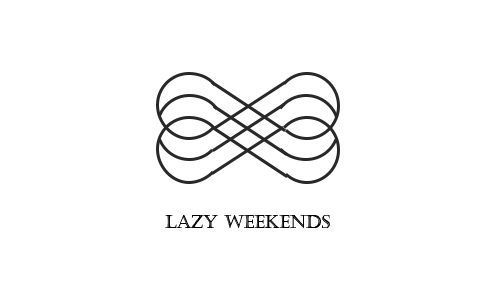
<style>
.page{position:relative;width:500px;height:300px;background:#ffffff}
.page>*{position:absolute;margin:0}
.t1{font:18px "Castellar";color:#000000}
</style>
<div class="page">
<p class="t1" style="left:165px;top:215px;width:165px;height:13px">lazy weekends</p>
</div>
